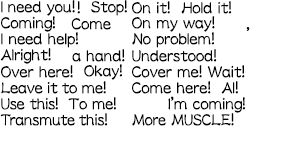
<style>
.page{position:relative;width:296px;height:160px;background:#ffffff}
.page>*{position:absolute;margin:0}
.t1{font:19px/16px "DFLeiSho-SB-WINP-RKSJ-H";color:#000000;scale:0.84 1}
.t2{font:19px/16px "DFLeiSho-SB-WINP-RKSJ-H";letter-spacing:-0.01em;color:#000000;scale:0.8 1}
.t3{font:19px/16px "DFLeiSho-SB-WINP-RKSJ-H";letter-spacing:-0.01em;color:#000000;scale:0.84 1}
.t4{font:19px/16px "DFLeiSho-SB-WINP-RKSJ-H";letter-spacing:-0.01em;color:#000000;scale:0.83 1}
.t5{font:19px/16px "DFLeiSho-SB-WINP-RKSJ-H";letter-spacing:-0.075em;color:#000000;scale:0.78 1}
.t6{font:19px/16px "DFLeiSho-SB-WINP-RKSJ-H";letter-spacing:-0.01em;color:#000000;scale:0.82 1}
.t7{font:19px/16px "DFLeiSho-SB-WINP-RKSJ-H";color:#000000;scale:0.83 1}
.t8{font:19px/16px "DFLeiSho-SB-WINP-RKSJ-H";letter-spacing:-0.01em;color:#000000;scale:0.81 1}
.t9{font:19px/16px "DFLeiSho-SB-WINP-RKSJ-H";letter-spacing:-0.05em;color:#000000;scale:0.81 1}
.t10{font:19px/16px "DFLeiSho-SB-WINP-RKSJ-H";letter-spacing:-0.8em;color:#000000;scale:0.84 1}
</style>
<div class="page">
<p class="t1" style="left:0px;top:0px;width:127px;height:126px">I need you! !  Stop!<br>Coming!   Come<br>I need help!<br>Alright!    a hand!<br>Over here!  Okay!<br><span class="t2">L</span><span class="t3">eave it to me!<br></span><span class="t4">Use this!  To me!<br></span><span class="t5">T</span><span class="t6">r</span><span class="t4">an</span><span class="t7">s</span><span class="t8">m</span><span class="t9">u</span><span class="t8">te </span><span class="t4">this!</span></p>
<p class="t1" style="left:132px;top:1px;width:118px;height:125px">On it!  Hold it! <br>On my way!      ,<br>No problem!<br>Understood!<br>Cover me! Wait!<br>Come here!  Al!<br>       I<span class="t10">’</span>m coming!<br><span class="t8">More MUSCLE!</span></p>
</div>
